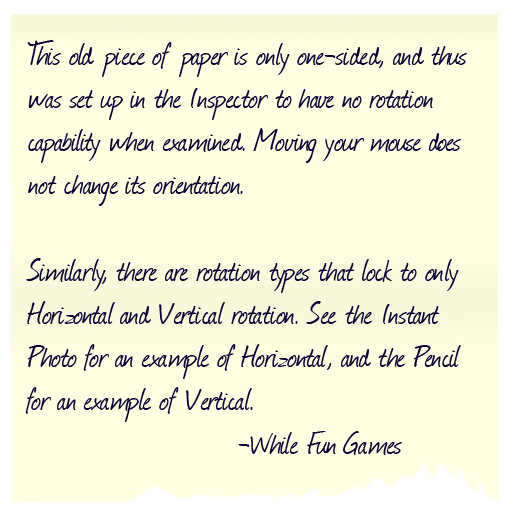
<style>
.page{position:relative;width:512px;height:512px;background:#ffffe1}
.page>*{position:absolute;margin:0}
.t1{font:36px "Journal";color:#060035}
</style>
<div class="page">
<p class="t1" style="left:25px;top:40px;width:442px;height:415px">This old piece of paper is only one-sided, and thus<br>was set up in the Inspector to have no rotation <br>capability when examined. Moving your mouse does<br>not change its orientation.<br><br>Similarly, there are rotation types that lock to only<br>Horizontal and Vertical rotation. See the Instant <br>Photo for an example of Horizontal, and the Pencil<br>for an example of Vertical.<br>                         -While Fun Games</p>
</div>
